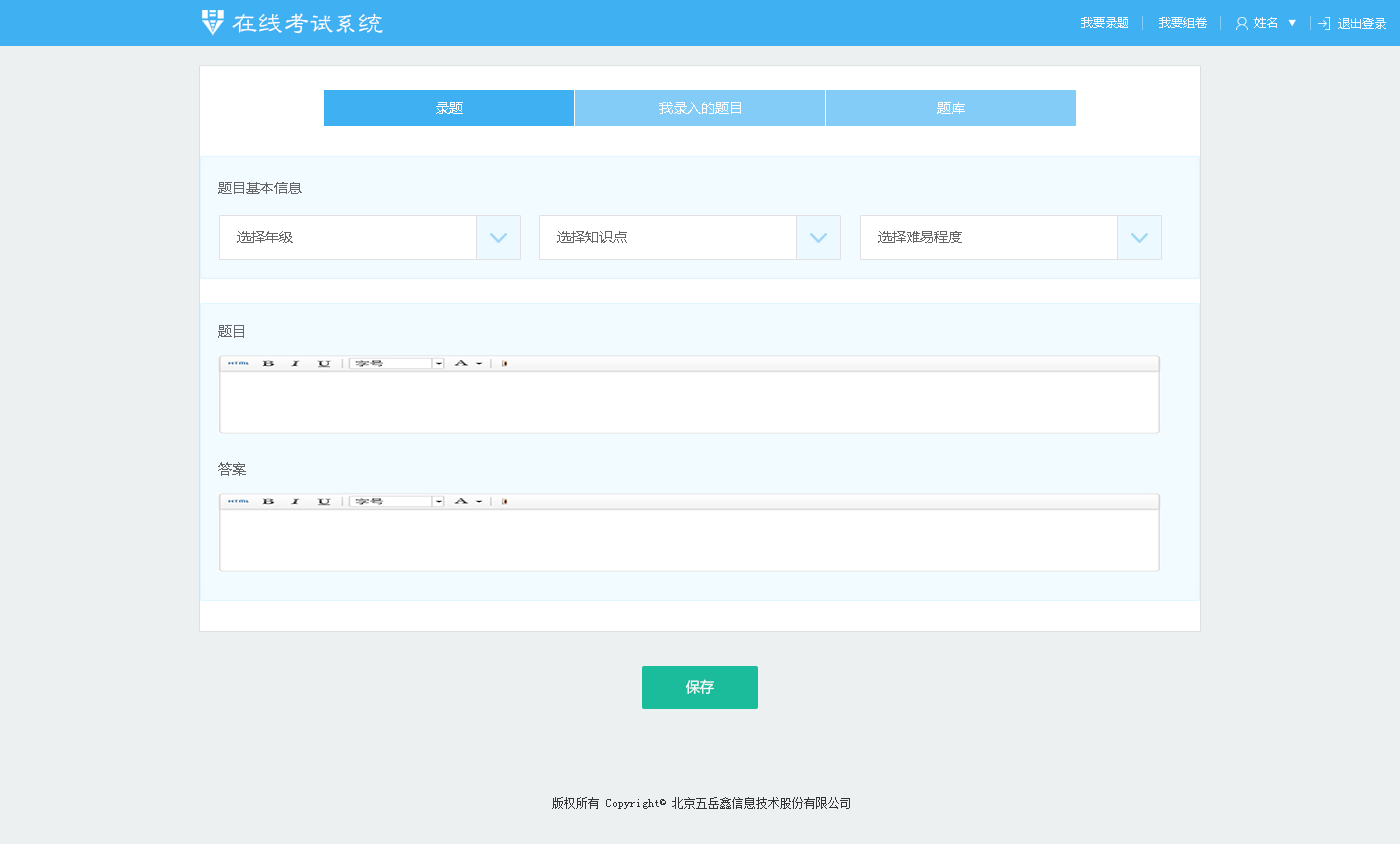
<style>
.page{position:relative;width:1400px;height:844px;background:#ecf0f1}
.page>*{position:absolute;margin:0}
.t1{font:26px "GBJenLei-Medium";color:#ffffff}
.t2{font:24px "GBJenLei-Medium";color:#ffffff}
.t3{font:12px "MicrosoftYaHei";color:#ffffff}
.t4{font:14px "MicrosoftYaHei";color:#ffffff}
.t5{font:14px "MicrosoftYaHei";color:#666666}
.t6{font:14.4px "MicrosoftYaHei";color:#666666}
.t7{font:14.4px "MicrosoftYaHei";color:#ffffff}
.t8{font:12px "NSimSun";color:#333333}
</style>
<div class="page">
<p class="t1" style="left:232px;top:13px;width:151px;height:21px">在线考<span class="t2">试系</span>统</p>
<p class="t3" style="left:1081px;top:17px;width:47px;height:11px;opacity:0.9">我要录题</p>
<p class="t3" style="left:1159px;top:17px;width:48px;height:11px;opacity:0.9">我要组卷</p>
<p class="t3" style="left:1254px;top:17px;width:23px;height:11px;opacity:0.9">姓名</p>
<p class="t3" style="left:1338px;top:18px;width:48px;height:11px;opacity:0.9">退出登录</p>
<p class="t4" style="left:436px;top:102px;width:27px;height:12px">录题</p>
<p class="t4" style="left:659px;top:102px;width:82px;height:12px">我录入的题目</p>
<p class="t4" style="left:937px;top:102px;width:28px;height:12px">题库</p>
<p class="t5" style="left:218px;top:182px;width:84px;height:12px">题目基本信息</p>
<p class="t5" style="left:237px;top:231px;width:56px;height:12px">选择年级</p>
<p class="t5" style="left:557px;top:231px;width:70px;height:12px">选择知识点</p>
<p class="t5" style="left:878px;top:231px;width:84px;height:12px">选择难易程度</p>
<p class="t6" style="left:218px;top:325px;width:26px;height:13px">题目</p>
<p class="t6" style="left:218px;top:462px;width:28px;height:14px">答案</p>
<p class="t7" style="left:685px;top:679px;width:29px;height:15px">保存</p>
<p class="t8" style="left:552px;top:797px;width:298px;height:12px">版权所有 Copyright© 北京五岳鑫信息技术股份有限公司</p>
</div>
